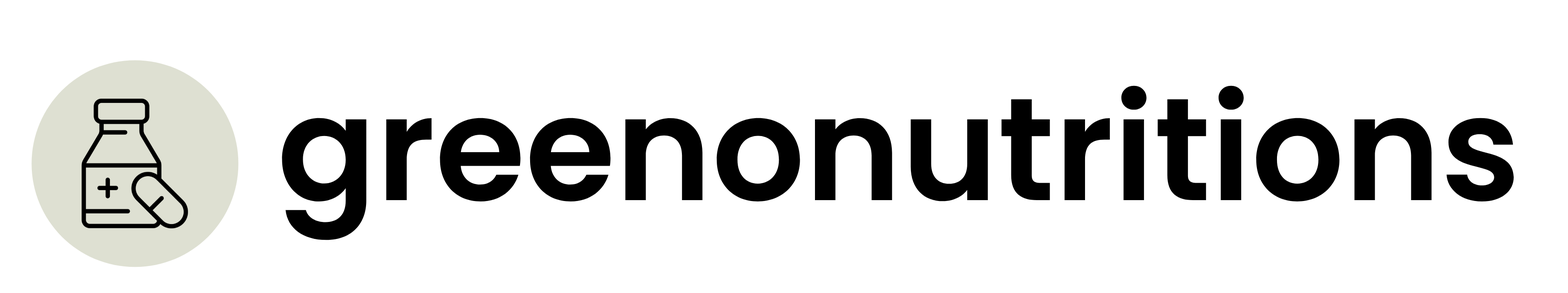
<style>
.page{position:relative;width:1568px;height:293px;background:#ffffff}
.page>*{position:absolute;margin:0}
.t1{font:146px "Poppins-SemiBold";color:#000000}
</style>
<div class="page">
<p class="t1" style="left:282px;top:86px;width:1232px;height:154px">greenonutritions</p>
</div>
